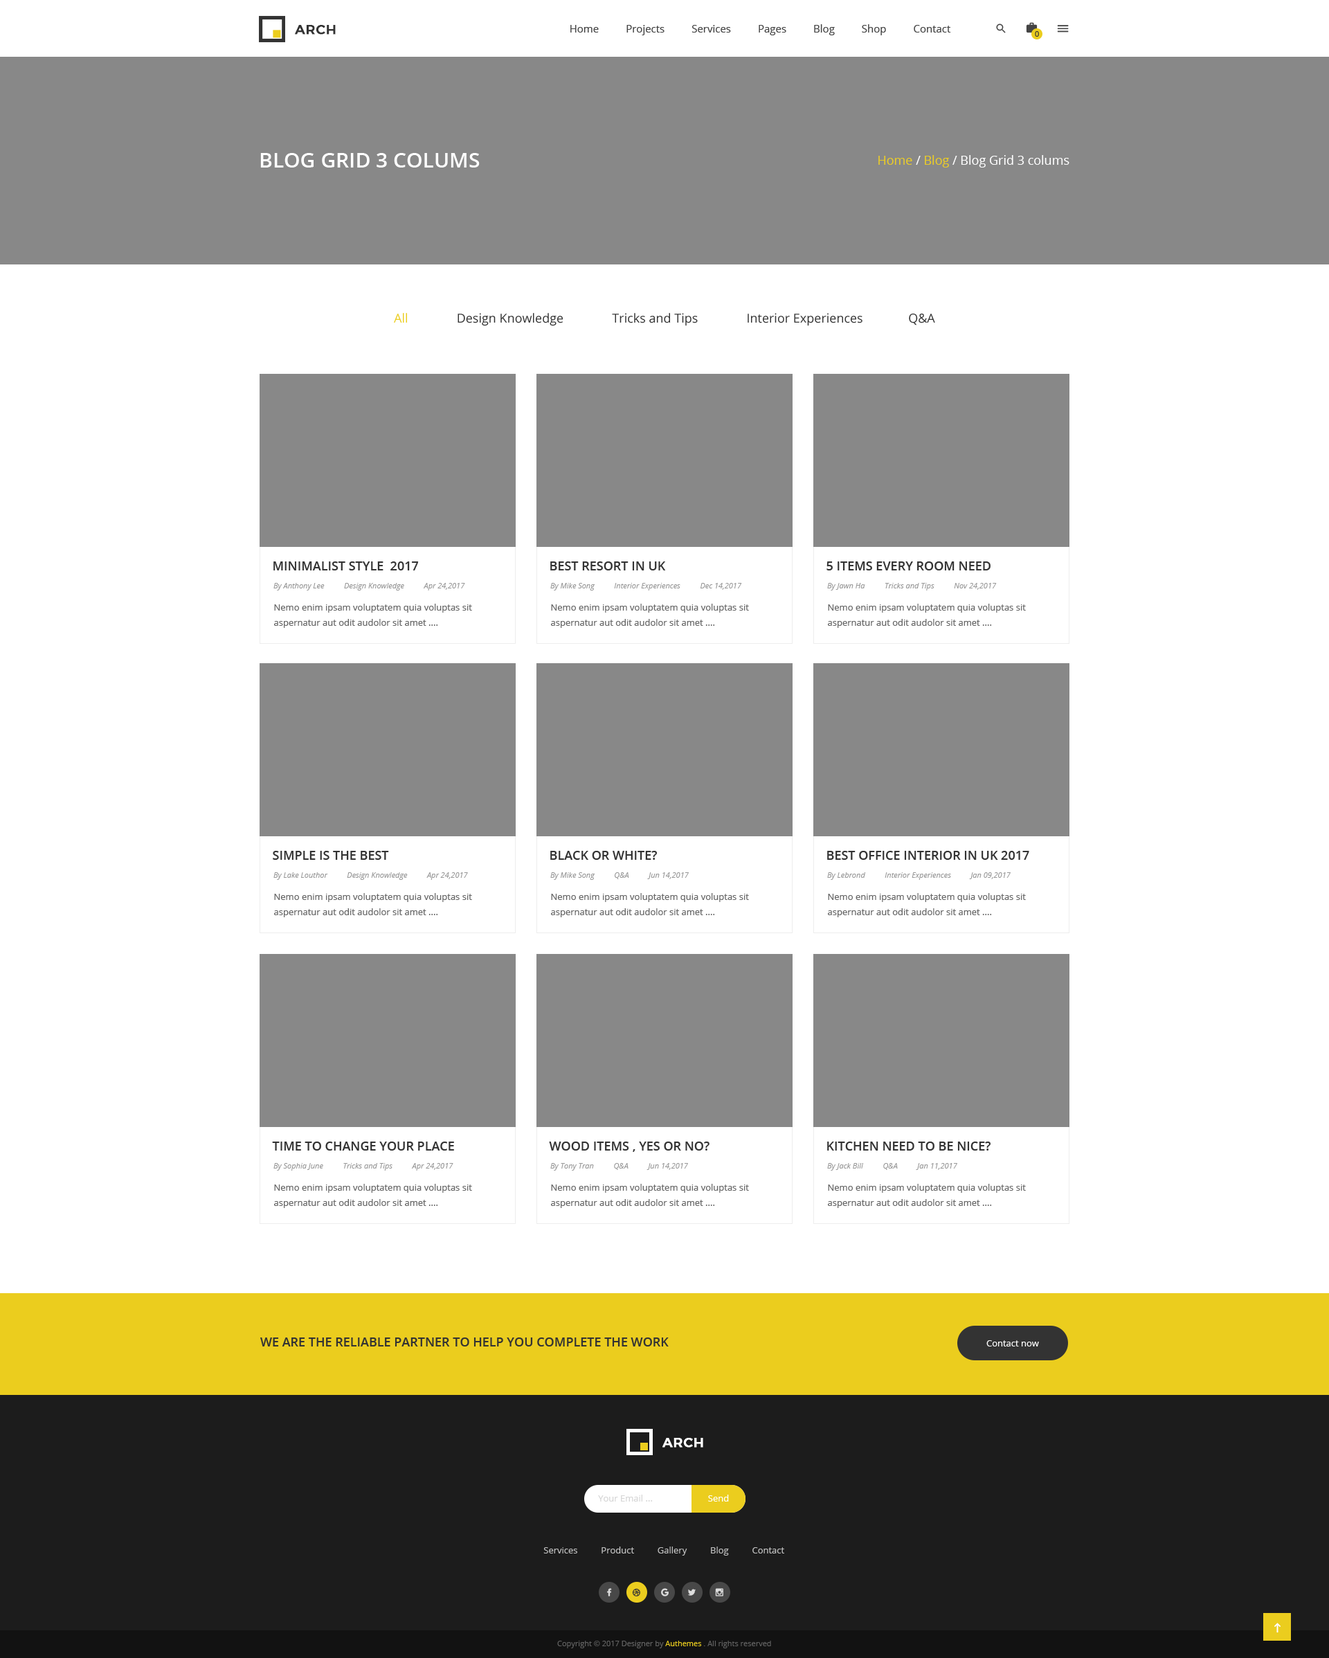
<style>
.page{position:relative;width:1329px;height:1658px;background:#ffffff}
.page>*{position:absolute;margin:0}
.t1{font:13.2px "Montserrat-Medium";letter-spacing:0.025em;color:#333333;text-transform:uppercase;font-weight:bold}
.t2{font:10.4px "OpenSans";color:#444444}
.t3{font:7.6px "OpenSans";color:#333333}
.t4{font:20.8px "OpenSans-Semibold";color:#ffffff;text-transform:uppercase}
.t5{font:12.5px "OpenSans-Regular";color:#ffffff}
.t6{font:12.5px "OpenSans-Regular";color:#ebcd1e}
.t7{font:12.5px "OpenSans";color:#333333}
.t8{font:12.5px "OpenSans";color:#ebcd1e}
.t9{font:12.5px "OpenSans-Semibold";color:#333333;text-transform:uppercase}
.t10{font:7.6px "OpenSans-Italic";color:#999999}
.t11{font:9px/15.2px "OpenSans";color:#666666}
.t12{font:9px "OpenSans";color:#ffffff}
.t13{font:13.2px "Montserrat-Medium";letter-spacing:0.025em;color:#ffffff;text-transform:uppercase;font-weight:bold}
.t14{font:9px "OpenSans";color:#d6d6d6}
.t15{font:9px "OpenSans";color:#c2c2c2}
.t16{font:7.6px "OpenSans";color:#626262}
.t17{font:7.6px "OpenSans";color:#ebcd1e}
</style>
<div class="page">
<p class="t1" style="left:295px;top:25px;width:41px;height:10px">arch</p>
<p class="t2" style="left:570px;top:24px;width:381px;height:11px">Home          Projects          Services          Pages          Blog          Shop          Contact</p>
<p class="t3" style="left:1035px;top:31px;width:4px;height:6px">0</p>
<p class="t4" style="left:260px;top:153px;width:220px;height:15px">blog grid 3 colums</p>
<p class="t5" style="left:879px;top:155px;width:191px;height:13px"><span class="t6">Home </span>/<span class="t6"> Blog </span>/ Blog Grid 3 colums</p>
<p class="t7" style="left:394px;top:313px;width:541px;height:13px"><span class="t8">All</span>               Design Knowledge               Tricks and Tips               Interior Experiences              Q&amp;A</p>
<p class="t9" style="left:273px;top:561px;width:146px;height:9px">Minimalist style  2017</p>
<p class="t9" style="left:550px;top:561px;width:116px;height:9px">best resort in uk</p>
<p class="t9" style="left:827px;top:561px;width:164px;height:9px">5 items every room need</p>
<p class="t10" style="left:273px;top:583px;width:192px;height:8px">By Anthony Lee          Design Knowledge          Apr 24,2017</p>
<p class="t10" style="left:550px;top:583px;width:192px;height:8px">By Mike Song          Interior Experiences          Dec 14,2017</p>
<p class="t10" style="left:827px;top:583px;width:170px;height:8px">By Jawn Ha          Tricks and Tips          Nov 24,2017</p>
<p class="t11" style="left:274px;top:604px;width:198px;height:24px">Nemo enim ipsam voluptatem quia voluptas sit aspernatur aut odit audolor sit amet ....</p>
<p class="t11" style="left:551px;top:604px;width:198px;height:24px">Nemo enim ipsam voluptatem quia voluptas sit aspernatur aut odit audolor sit amet ....</p>
<p class="t11" style="left:828px;top:604px;width:198px;height:24px">Nemo enim ipsam voluptatem quia voluptas sit aspernatur aut odit audolor sit amet ....</p>
<p class="t9" style="left:273px;top:851px;width:116px;height:9px">simple is the best</p>
<p class="t9" style="left:550px;top:851px;width:107px;height:9px">Black or White?</p>
<p class="t9" style="left:827px;top:851px;width:202px;height:9px">Best office interior in uk 2017</p>
<p class="t10" style="left:273px;top:872px;width:195px;height:8px">By Lake Louthor          Design Knowledge          Apr 24,2017</p>
<p class="t10" style="left:550px;top:872px;width:139px;height:8px">By Mike Song          Q&amp;A          Jun 14,2017</p>
<p class="t10" style="left:827px;top:872px;width:184px;height:8px">By Lebrond          Interior Experiences          Jan 09,2017</p>
<p class="t11" style="left:274px;top:893px;width:198px;height:24px">Nemo enim ipsam voluptatem quia voluptas sit aspernatur aut odit audolor sit amet ....</p>
<p class="t11" style="left:551px;top:893px;width:198px;height:24px">Nemo enim ipsam voluptatem quia voluptas sit aspernatur aut odit audolor sit amet ....</p>
<p class="t11" style="left:828px;top:893px;width:198px;height:24px">Nemo enim ipsam voluptatem quia voluptas sit aspernatur aut odit audolor sit amet ....</p>
<p class="t9" style="left:272px;top:1142px;width:182px;height:9px">time to change your place</p>
<p class="t9" style="left:549px;top:1142px;width:161px;height:10px">wood items , yes or no?</p>
<p class="t9" style="left:827px;top:1142px;width:164px;height:9px">kitchen need to be nice?</p>
<p class="t10" style="left:273px;top:1163px;width:180px;height:8px">By Sophia June          Tricks and Tips          Apr 24,2017</p>
<p class="t10" style="left:550px;top:1163px;width:138px;height:8px">By Tony Tran          Q&amp;A          Jun 14,2017</p>
<p class="t10" style="left:827px;top:1163px;width:130px;height:8px">By Jack Bill          Q&amp;A          Jan 11,2017</p>
<p class="t11" style="left:274px;top:1184px;width:198px;height:24px">Nemo enim ipsam voluptatem quia voluptas sit aspernatur aut odit audolor sit amet ....</p>
<p class="t11" style="left:551px;top:1184px;width:198px;height:24px">Nemo enim ipsam voluptatem quia voluptas sit aspernatur aut odit audolor sit amet ....</p>
<p class="t11" style="left:828px;top:1184px;width:198px;height:24px">Nemo enim ipsam voluptatem quia voluptas sit aspernatur aut odit audolor sit amet ....</p>
<p class="t9" style="left:260px;top:1338px;width:409px;height:9px">We are the reliable partner to help you complete the work</p>
<p class="t12" style="left:987px;top:1340px;width:52px;height:7px">Contact now</p>
<p class="t13" style="left:663px;top:1438px;width:40px;height:10px">arch</p>
<p class="t14" style="left:598px;top:1495px;width:55px;height:7px">Your Email ...</p>
<p class="t12" style="left:708px;top:1495px;width:21px;height:7px">Send</p>
<p class="t15" style="left:543px;top:1547px;width:241px;height:9px">Services          Product          Gallery          Blog          Contact</p>
<p class="t16" style="left:557px;top:1641px;width:214px;height:7px">Copyright © 2017 Designer by <span class="t17">Authemes </span>. All rights reserved</p>
</div>
